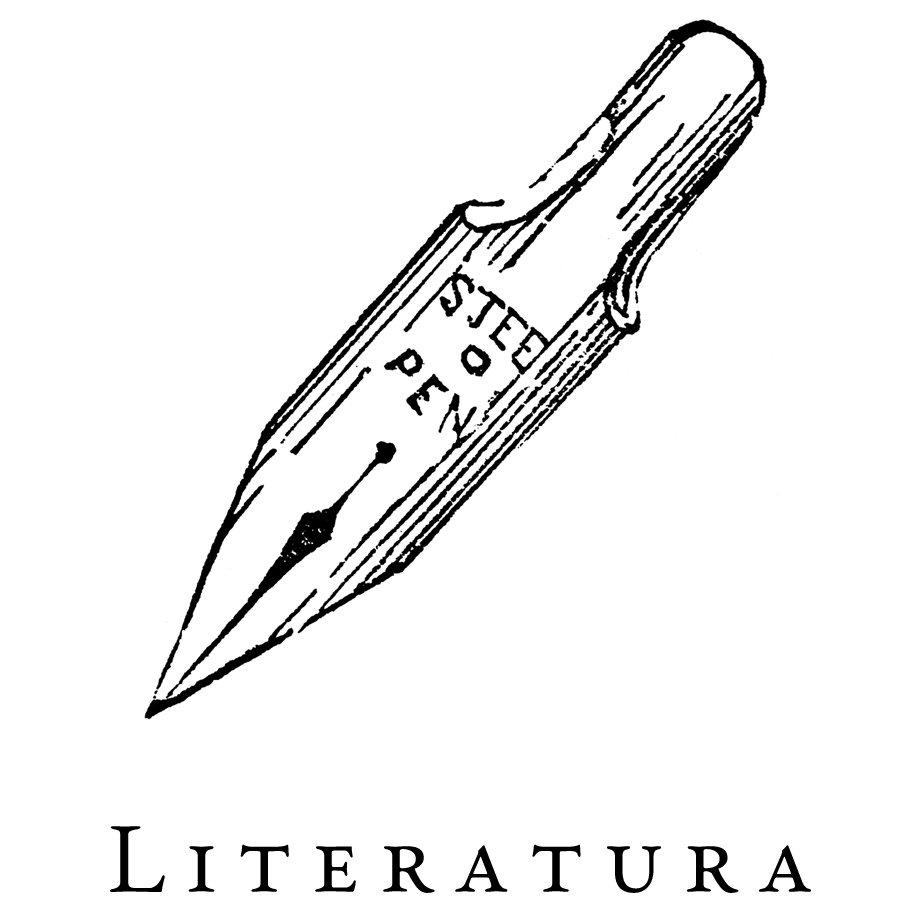
<style>
.page{position:relative;width:900px;height:900px;background:#ffffff}
.page>*{position:absolute;margin:0}
.t1{font:100px "EBGaramondSC12-Regular";letter-spacing:0.2em;color:#000000}
</style>
<div class="page">
<p class="t1" style="left:110px;top:826px;width:701px;height:67px">Literatura</p>
</div>
